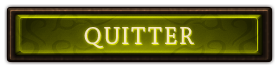
<style>
.page{position:relative;width:280px;height:70px}
.page>*{position:absolute;margin:0}
.t1{font:25px "ChaparralPro-Regular";letter-spacing:0.05em;color:#f4e5bf;text-transform:uppercase}
</style>
<div class="page">
<p class="t1" style="left:84px;top:27px;width:110px;height:21px">quitter</p>
</div>
